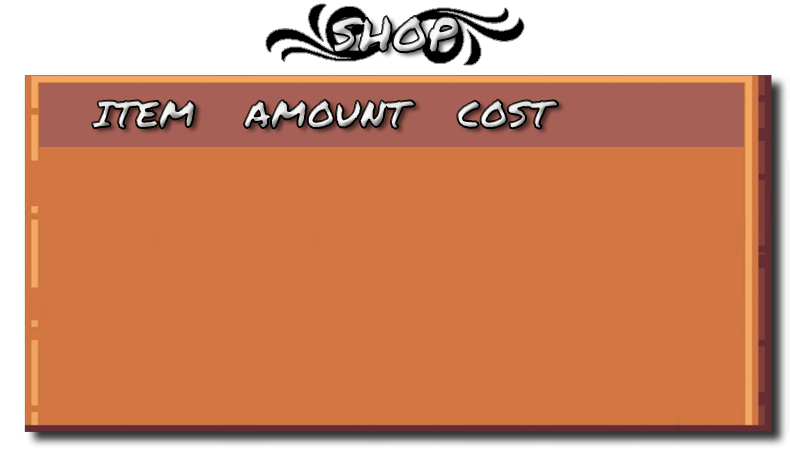
<style>
.page{position:relative;width:790px;height:456px;background:#d27642}
.page>*{position:absolute;margin:0}
.t1{font:48px "PermanentMarker"}
.t2{font:37.3px "PermanentMarker"}
</style>
<div class="page">
<p class="t1" style="left:331px;top:16px;width:128px;height:37px">SHOP</p>
<p class="t2" style="left:92px;top:100px;width:103px;height:29px">ITEM</p>
<p class="t2" style="left:243px;top:100px;width:172px;height:29px">AMOUNT</p>
<p class="t2" style="left:457px;top:100px;width:101px;height:29px">COST</p>
</div>
